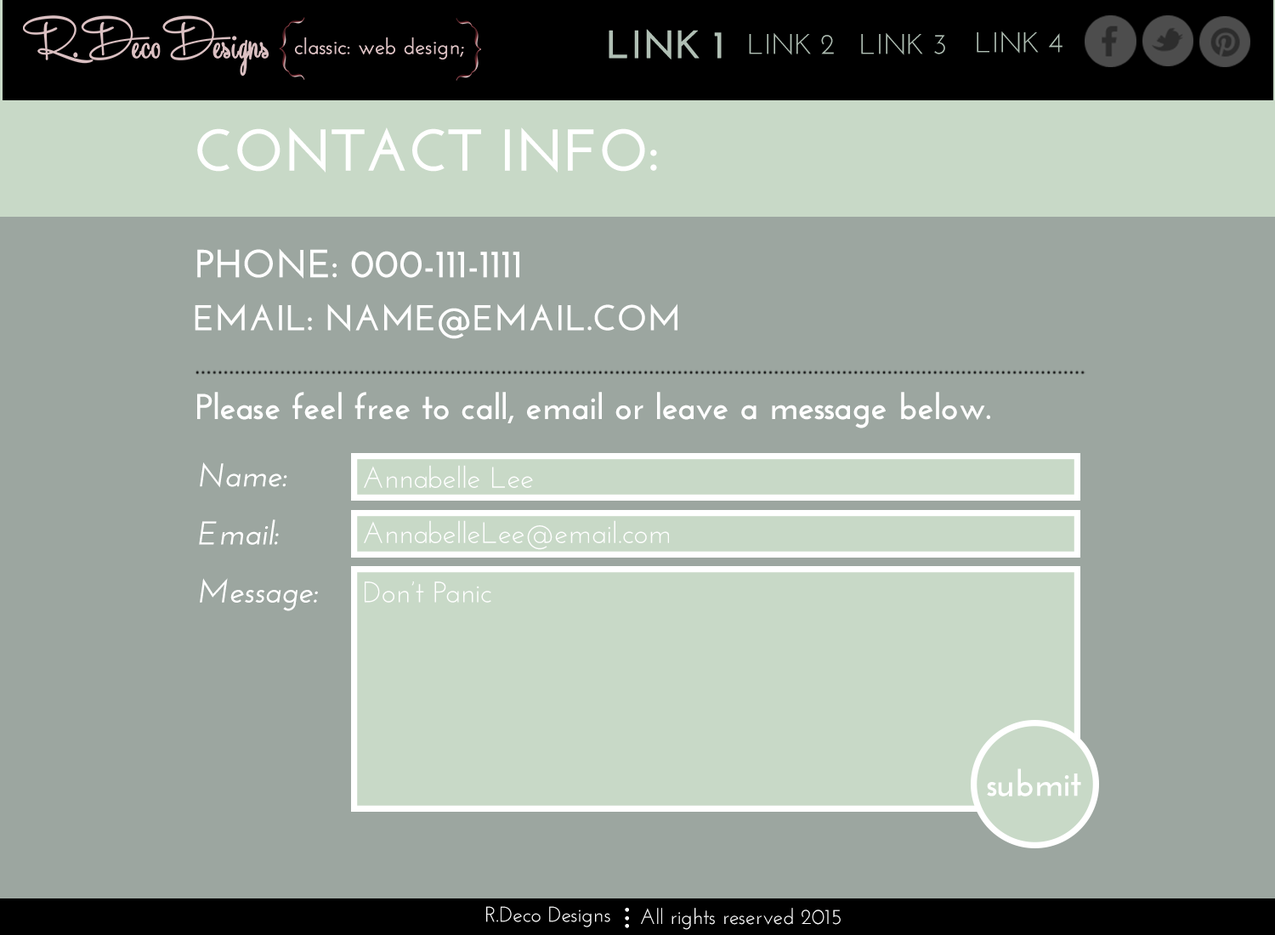
<style>
.page{position:relative;width:1275px;height:935px;background:#9ca6a0}
.page>*{position:absolute;margin:0}
.t1{font:28.3px "JosefinSans";color:#b0bfb4}
.t2{font:58.8px "JosefinSans-Bold";color:#ffffff}
.t3{font:39.2px "JosefinSans-Bold";color:#ffffff}
.t4{font:35.9px "JosefinSans-Bold";color:#ffffff}
.t5{font:32.7px "JosefinSans-SemiBoldItalic";color:#ffffff}
.t6{font:29.4px "JosefinSans";color:#ffffff}
.t7{font:21.3px "JosefinSans";color:#fefefe}
</style>
<div class="page">
<p class="t1" style="left:749px;top:33px;width:85px;height:22px">LINK 2</p>
<p class="t1" style="left:861px;top:33px;width:84px;height:22px">LINK 3</p>
<p class="t1" style="left:977px;top:31px;width:86px;height:23px">LINK 4</p>
<p class="t2" style="left:197px;top:128px;width:460px;height:45px">CONTACT INFO:</p>
<p class="t3" style="left:197px;top:248px;width:322px;height:31px">PHONE: 000-111-1111</p>
<p class="t4" style="left:195px;top:303px;width:483px;height:36px">EMAIL: NAME@EMAIL.COM</p>
<p class="t4" style="left:197px;top:392px;width:793px;height:36px">Please feel free to call, email or leave a message below.</p>
<p class="t5" style="left:200px;top:462px;width:87px;height:26px">Name:</p>
<p class="t6" style="left:364px;top:465px;width:169px;height:23px">Annabelle Lee</p>
<p class="t5" style="left:199px;top:519px;width:80px;height:26px">Email:</p>
<p class="t6" style="left:364px;top:520px;width:305px;height:30px">AnnabelleLee@email.com</p>
<p class="t5" style="left:200px;top:578px;width:118px;height:33px">Message:</p>
<p class="t6" style="left:365px;top:581px;width:126px;height:22px">Don’t Panic</p>
<p class="t4" style="left:987px;top:768px;width:94px;height:29px">submit</p>
<p class="t7" style="left:486px;top:906px;width:124px;height:21px">R.Deco Designs</p>
<p class="t7" style="left:625px;top:908px;width:4px;height:4px">•</p>
<p class="t7" style="left:625px;top:916px;width:4px;height:5px">•</p>
<p class="t7" style="left:641px;top:908px;width:200px;height:22px">All rights reserved 2015</p>
<p class="t7" style="left:625px;top:924px;width:4px;height:4px">•</p>
</div>
